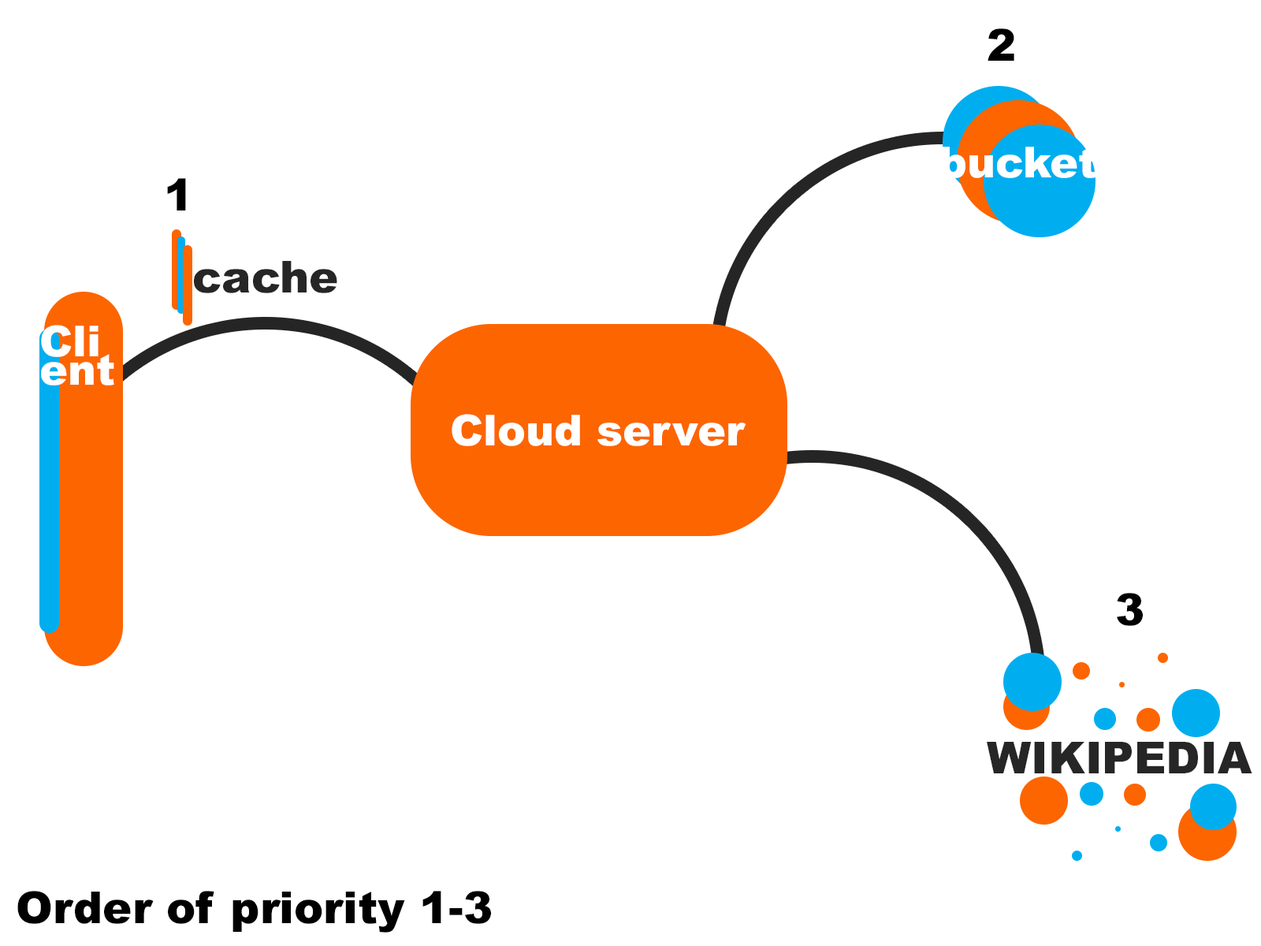
<style>
.page{position:relative;width:1261px;height:946px;background:#ffffff}
.page>*{position:absolute;margin:0}
.t1{font:44.1px "Arial-Black";color:#000000}
.t2{font:42.6px "Arial-Black";color:#ffffff}
.t3{font:44.1px "Arial-Black";color:#262626}
.t4{font:42.6px/14.2px "Arial-Black";color:#ffffff}
</style>
<div class="page">
<p class="t1" style="left:987px;top:28px;width:27px;height:33px">2</p>
<p class="t2" style="left:941px;top:147px;width:155px;height:31px">bucket</p>
<p class="t1" style="left:167px;top:178px;width:19px;height:32px">1</p>
<p class="t3" style="left:194px;top:261px;width:143px;height:32px">cache</p>
<p class="t4" style="left:41px;top:325px;width:73px;height:60px">Cli<br><br>ent</p>
<p class="t2" style="left:452px;top:414px;width:294px;height:32px">Cloud server</p>
<p class="t1" style="left:1117px;top:593px;width:26px;height:33px">3</p>
<p class="t3" style="left:987px;top:742px;width:265px;height:31px">WIKIPEDIA</p>
<p class="t1" style="left:17px;top:891px;width:474px;height:41px">Order of priority 1-3</p>
</div>
